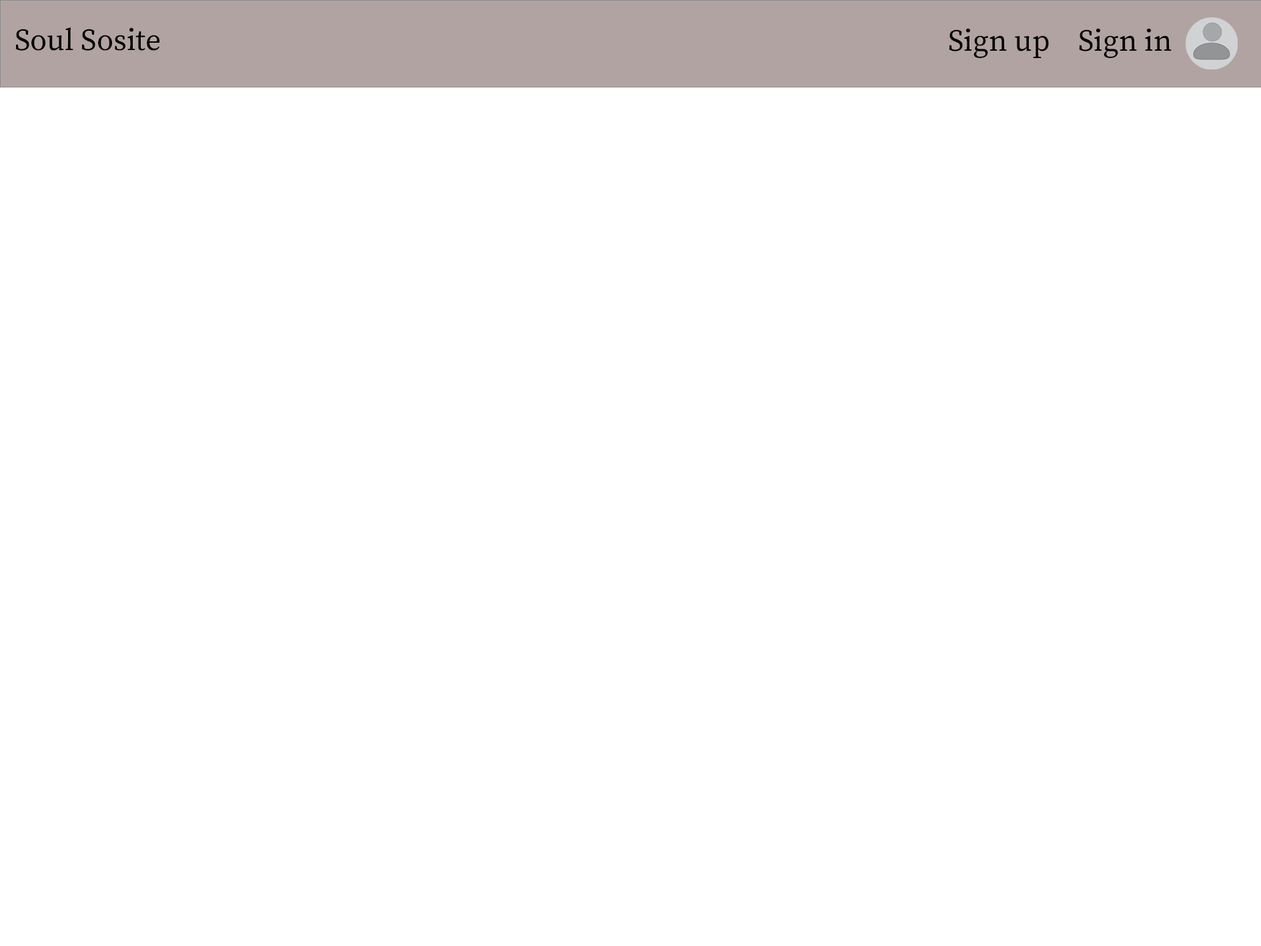
<style>
.page{position:relative;width:1261px;height:946px;background:#ffffff}
.page>*{position:absolute;margin:0}
.t1{font:30.6px "SourceSerifRoman-Regular";color:#000000}
</style>
<div class="page">
<p class="t1" style="left:15px;top:27px;width:145px;height:24px">Soul Sosite</p>
<p class="t1" style="left:949px;top:28px;width:100px;height:30px">Sign up</p>
<p class="t1" style="left:1079px;top:28px;width:93px;height:30px">Sign in</p>
</div>
